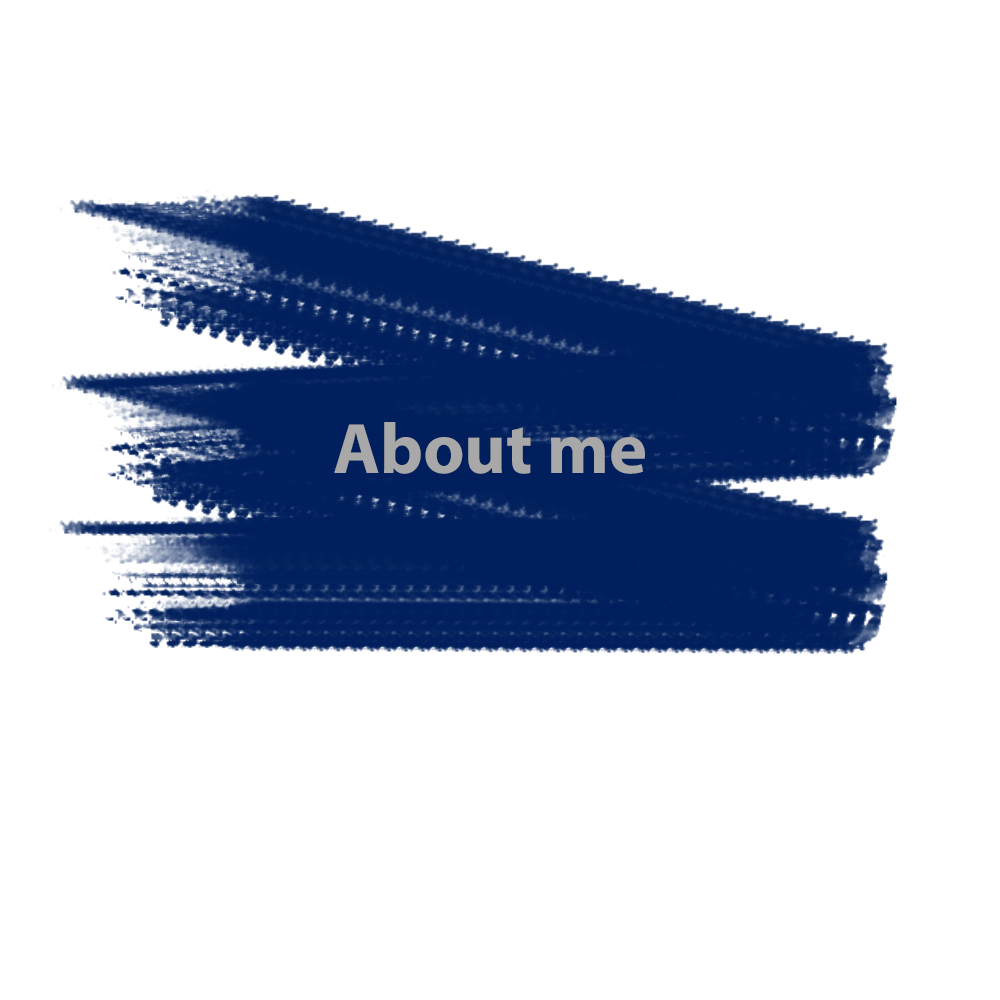
<style>
.page{position:relative;width:1000px;height:1000px;background:#ffffff}
.page>*{position:absolute;margin:0}
.t1{font:72px "MyriadPro-Bold";color:#a8a8a8}
</style>
<div class="page">
<p class="t1" style="left:334px;top:422px;width:311px;height:52px">About me</p>
</div>
